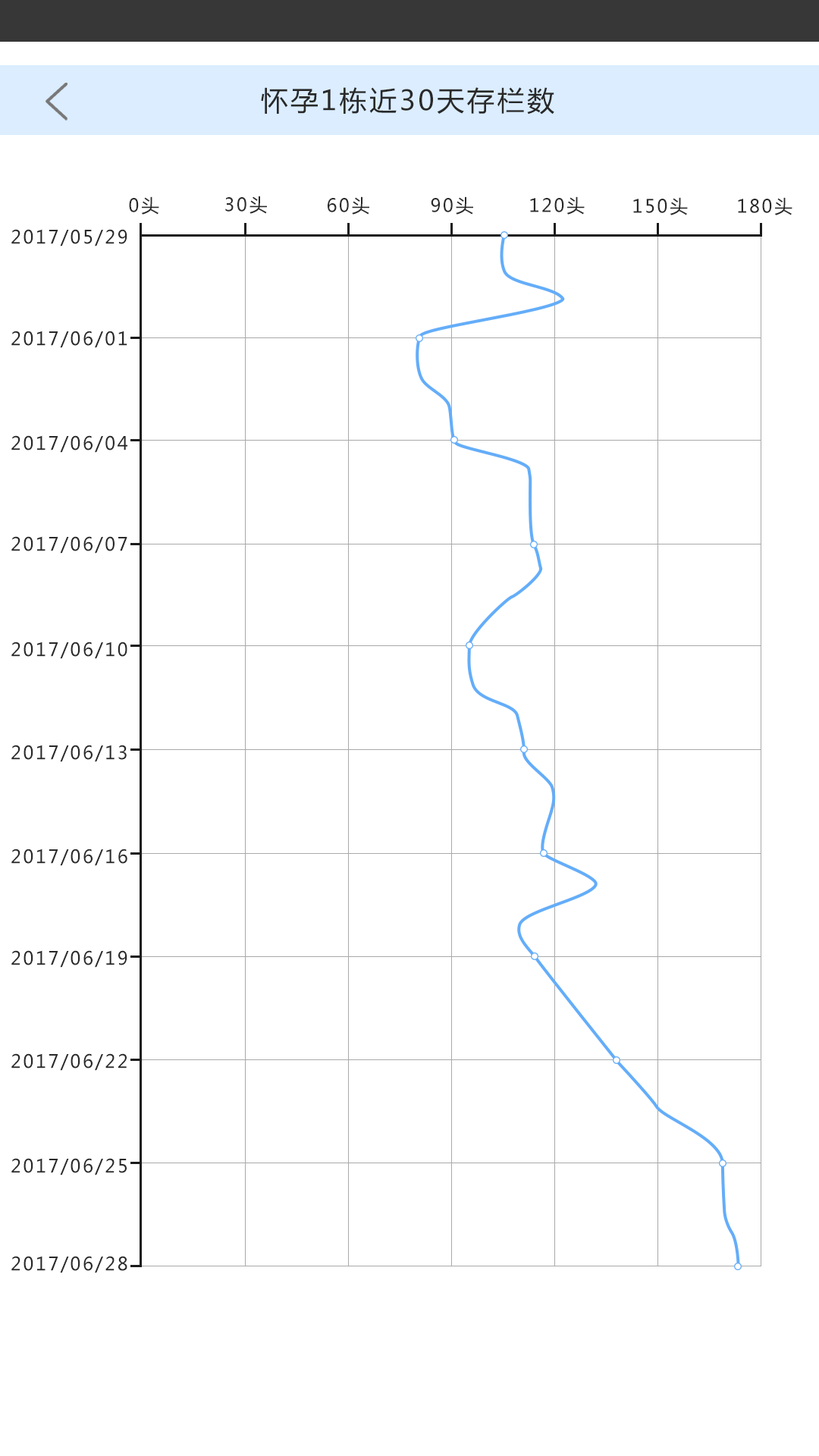
<style>
.page{position:relative;width:819px;height:1456px;background:#ffffff}
.page>*{position:absolute;margin:0}
.t1{font:27.3px "MicrosoftYaHei";letter-spacing:0.1em;color:#292929}
.t2{font:18.2px "MicrosoftYaHei";letter-spacing:0.1em;color:#292929}
</style>
<div class="page">
<p class="t1" style="left:261px;top:87px;width:293px;height:28px">怀孕1栋近30天存栏数</p>
<p class="t2" style="left:129px;top:196px;width:30px;height:19px">0头</p>
<p class="t2" style="left:225px;top:196px;width:42px;height:18px">30头</p>
<p class="t2" style="left:328px;top:196px;width:41px;height:19px">60头</p>
<p class="t2" style="left:431px;top:196px;width:42px;height:19px">90头</p>
<p class="t2" style="left:530px;top:196px;width:55px;height:19px">120头</p>
<p class="t2" style="left:633px;top:197px;width:55px;height:18px">150头</p>
<p class="t2" style="left:738px;top:197px;width:54px;height:18px">180头</p>
<p class="t2" style="left:11px;top:229px;width:116px;height:17px">2017/05/29</p>
<p class="t2" style="left:11px;top:331px;width:116px;height:17px">2017/06/01</p>
<p class="t2" style="left:11px;top:435px;width:116px;height:18px">2017/06/04</p>
<p class="t2" style="left:11px;top:536px;width:116px;height:18px">2017/06/07</p>
<p class="t2" style="left:11px;top:642px;width:116px;height:17px">2017/06/10</p>
<p class="t2" style="left:11px;top:745px;width:116px;height:17px">2017/06/13</p>
<p class="t2" style="left:11px;top:849px;width:116px;height:17px">2017/06/16</p>
<p class="t2" style="left:11px;top:950px;width:116px;height:18px">2017/06/19</p>
<p class="t2" style="left:11px;top:1053px;width:116px;height:18px">2017/06/22</p>
<p class="t2" style="left:11px;top:1158px;width:116px;height:17px">2017/06/25</p>
<p class="t2" style="left:11px;top:1256px;width:116px;height:17px">2017/06/28</p>
</div>
